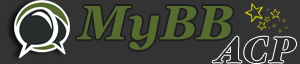
<style>
.page{position:relative;width:300px;height:64px;background:#333333}
.page>*{position:absolute;margin:0}
.t1{font:48px "Georgia-BoldItalic";color:#556b2f}
</style>
<div class="page">
<p class="t1" style="left:76px;top:6px;width:157px;height:44px">MyBB</p>
</div>
